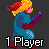
<style>
.page{position:relative;width:49px;height:49px;background:#333333}
.page>*{position:absolute;margin:0}
.t1{font:8px "MS Sans Serif";color:#ffffff}
</style>
<div class="page">
<p class="t1" style="left:6px;top:37px;width:37px;height:11px">1 Player</p>
</div>
